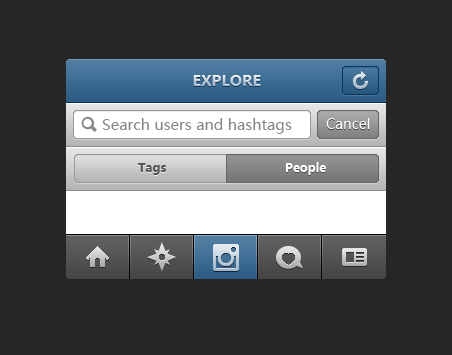
<style>
.page{position:relative;width:452px;height:355px;background:#262626}
.page>*{position:absolute;margin:0}
.t1{font:15px "MicrosoftYaHei-Bold"}
.t2{font:15px "MicrosoftYaHei";color:#888888}
.t3{font:14px "MicrosoftYaHei";color:#ffffff}
.t4{font:12px "MicrosoftYaHei-Bold";color:#555555}
.t5{font:12px "MicrosoftYaHei-Bold";color:#ffffff}
</style>
<div class="page">
<p class="t1" style="left:193px;top:75px;width:68px;height:11px">EXPLORE</p>
<p class="t2" style="left:102px;top:118px;width:190px;height:16px">Search users and hashtags</p>
<p class="t3" style="left:326px;top:118px;width:44px;height:11px">Cancel</p>
<p class="t4" style="left:138px;top:163px;width:29px;height:12px">Tags</p>
<p class="t5" style="left:285px;top:162px;width:41px;height:13px">People</p>
</div>
